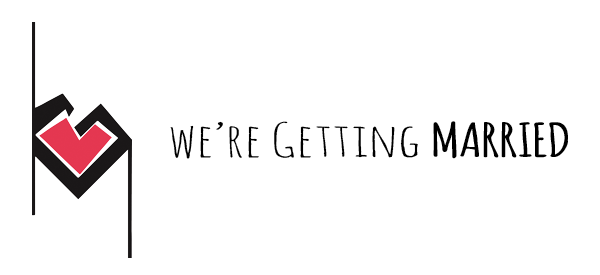
<style>
.page{position:relative;width:600px;height:275px;background:#ffffff}
.page>*{position:absolute;margin:0}
.t1{font:46px "AmaticSC-Regular";color:#000000;scale:1.5 1}
.t2{font:46px "Amatic-Bold";color:#000000;scale:1.5 1}
</style>
<div class="page">
<p class="t1" style="left:170px;top:121px;width:398px;height:38px">we’re Getting <span class="t2">MARRIED</span></p>
</div>
